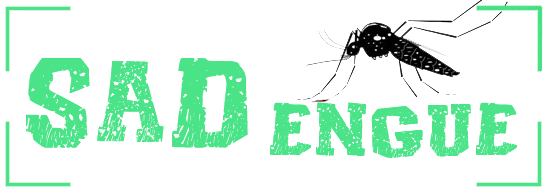
<style>
.page{position:relative;width:550px;height:194px;background:#ffffff}
.page>*{position:absolute;margin:0}
.t1{font:120px "CordelEncarnado";color:#4ae387}
.t2{font:70px "CordelEncarnado";color:#4ae387}
</style>
<div class="page">
<p class="t1" style="left:26px;top:58px;width:222px;height:90px">SAD</p>
<p class="t2" style="left:270px;top:102px;width:248px;height:56px">engue</p>
</div>
